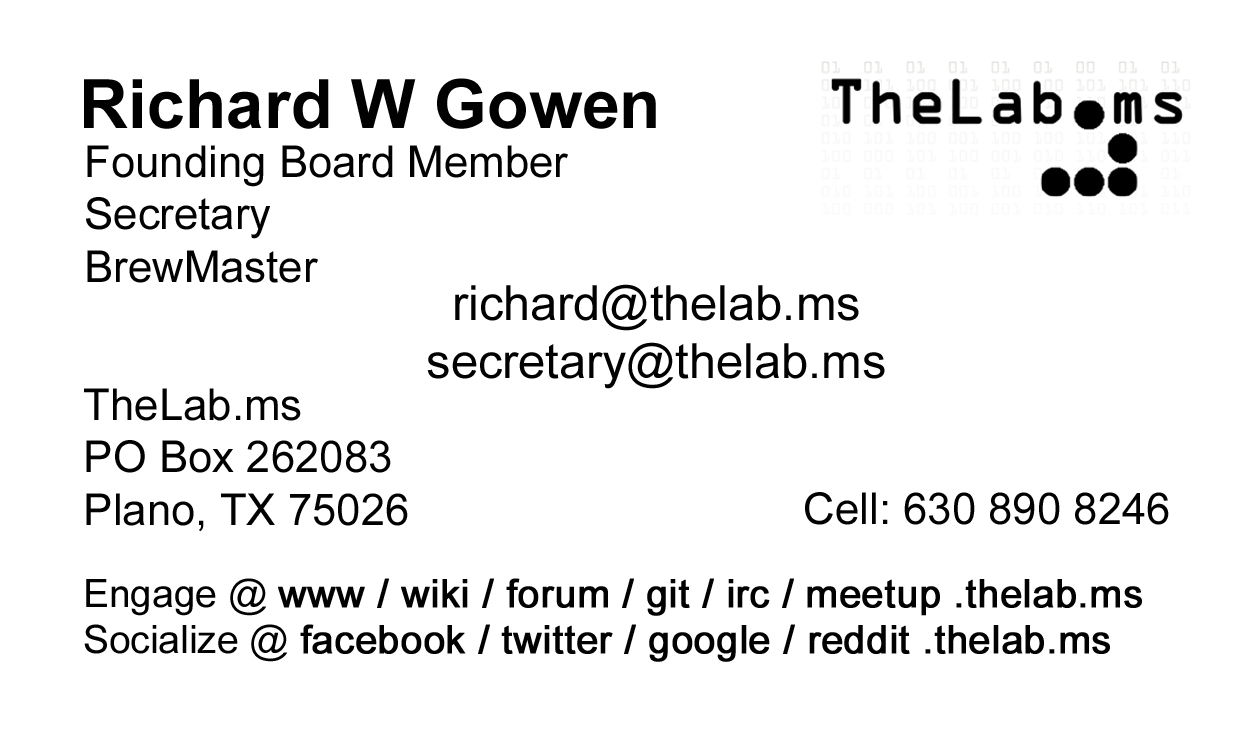
<style>
.page{position:relative;width:1260px;height:735px;background:#ffffff}
.page>*{position:absolute;margin:0}
.t1{font:68.1px "Arial-BoldMT";color:#010101}
.t2{font:43.8px "ArialMT";color:#010101}
.t3{font:48.6px "ArialMT";color:#010101}
.t4{font:38.9px "ArialMT";color:#010101;font-weight:bold}
.t5{font:38.9px "ArialMT";color:#010101}
</style>
<div class="page">
<p class="t1" style="left:84px;top:78px;width:572px;height:51px">Richard W Gowen</p>
<p class="t2" style="left:86px;top:145px;width:482px;height:138px">Founding Board Member<br>Secretary<br>BrewMaster</p>
<p class="t3" style="left:427px;top:284px;width:458px;height:105px;text-align:center">richard@thelab.ms<br>secretary@thelab.ms</p>
<p class="t2" style="left:84px;top:388px;width:324px;height:144px">TheLab.ms<br>PO Box 262083<br>Plano, TX 75026</p>
<p class="t2" style="left:805px;top:492px;width:364px;height:33px">Cell: 630 890 8246</p>
<p class="t4" style="left:84px;top:578px;width:1058px;height:84px"><span class="t5">Engage @ </span>www / wiki / forum / git / irc / meetup .thelab.ms<br><span class="t5">Socialize @ </span>facebook / twitter / google / reddit .thelab.ms</p>
</div>
